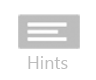
<style>
.page{position:relative;width:96px;height:80px;background:#ffffff}
.page>*{position:absolute;margin:0}
.t1{font:18px "SegoeUI";color:#bdbdbd}
</style>
<div class="page">
<p class="t1" style="left:28px;top:56px;width:40px;height:13px">Hints</p>
</div>
